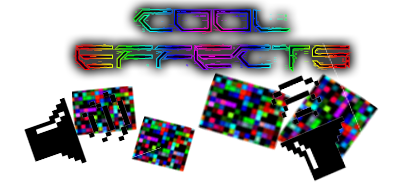
<style>
.page{position:relative;width:404px;height:182px;background:#ffffff}
.page>*{position:absolute;margin:0}
.t1{font:30px "Corruptor-LDR"}
</style>
<div class="page">
<p class="t1" style="left:73px;top:8px;width:279px;height:64px;text-align:center">COOL<br>EFFECTS</p>
</div>
